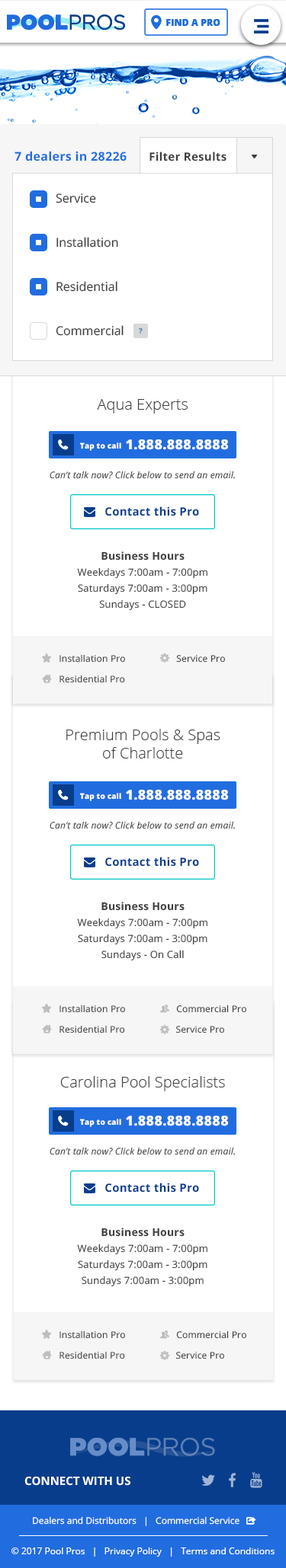
<style>
.page{position:relative;width:286px;height:1568px;background:#ffffff}
.page>*{position:absolute;margin:0}
.t1{font:12.2px "OpenSans-Bold";letter-spacing:0.02em;color:#216ddf}
.t2{font:11.4px "OpenSans-Bold";letter-spacing:0.02em;color:#3f3f3f}
.t3{font:12.2px/44.2px "OpenSans";color:#3f3f3f}
.t4{font:15.2px "OpenSans-Light";color:#3f3f3f}
.t5{font:7.6px "OpenSans-Extrabold";letter-spacing:0.02em;color:#fefefe}
.t6{font:13.7px "OpenSans-Extrabold";letter-spacing:0.02em;color:#fefefe}
.t7{font:9.1px "OpenSans-Italic";letter-spacing:0.02em;color:#3f3f3f}
.t8{font:11.4px "OpenSans-Bold";letter-spacing:0.02em;color:#083d8c}
.t9{font:9.9px/16px "OpenSans";letter-spacing:0.02em;color:#3f3f3f}
.t10{font:10.7px "OpenSans-Bold";letter-spacing:0.02em;color:#3f3f3f}
.t11{font:9.2px/20.6px "OpenSans";letter-spacing:0.02em;color:#3f3f3f}
.t12{font:11.6px "OpenSans-Bold";color:#ffffff}
.t13{font:9px "OpenSans";color:#ffffff}
.t14{font:9.1px "OpenSans";color:#ffffff}
</style>
<div class="page">
<p class="t1" style="left:14px;top:151px;width:112px;height:10px">7 dealers in 28226</p>
<p class="t2" style="left:149px;top:152px;width:77px;height:9px">Filter Results</p>
<p class="t3" style="left:56px;top:193px;width:67px;height:143px">Service<br>Installation<br>Residential<br>Commercial</p>
<p class="t4" style="left:97px;top:399px;width:90px;height:15px">Aqua Experts</p>
<p class="t5" style="left:79px;top:442px;width:42px;height:9px">Tap to call</p>
<p class="t6" style="left:126px;top:439px;width:102px;height:11px">1.888.888.8888</p>
<p class="t7" style="left:49px;top:471px;width:186px;height:8px">Can’t talk now? Click below to send an email.</p>
<p class="t8" style="left:105px;top:506px;width:94px;height:10px">Contact this Pro</p>
<p class="t9" style="left:77px;top:551px;width:130px;height:60px;text-align:center"><span class="t10">Business Hours<br></span>Weekdays 7:00am - 7:00pm<br>Saturdays 7:00am - 3:00pm<br>Sundays - CLOSED</p>
<p class="t11" style="left:59px;top:654px;width:166px;height:29px">Installation Pro                    Service Pro<br>Residential Pro</p>
<p class="t4" style="left:66px;top:729px;width:154px;height:29px;text-align:center">Premium Pools &amp; Spas<br>of Charlotte</p>
<p class="t5" style="left:79px;top:793px;width:42px;height:8px">Tap to call</p>
<p class="t6" style="left:126px;top:790px;width:102px;height:10px">1.888.888.8888</p>
<p class="t7" style="left:49px;top:821px;width:186px;height:8px">Can’t talk now? Click below to send an email.</p>
<p class="t8" style="left:105px;top:857px;width:94px;height:10px">Contact this Pro</p>
<p class="t9" style="left:77px;top:902px;width:130px;height:59px;text-align:center"><span class="t10">Business Hours<br></span>Weekdays 7:00am - 7:00pm<br>Saturdays 7:00am - 3:00pm<br>Sundays - On Call</p>
<p class="t11" style="left:59px;top:1004px;width:187px;height:29px">Installation Pro                    Commercial Pro<br>Residential Pro                    Service Pro</p>
<p class="t4" style="left:60px;top:1076px;width:165px;height:15px">Carolina Pool Specialists</p>
<p class="t5" style="left:79px;top:1119px;width:42px;height:8px">Tap to call</p>
<p class="t6" style="left:126px;top:1116px;width:102px;height:10px">1.888.888.8888</p>
<p class="t7" style="left:49px;top:1147px;width:186px;height:8px">Can’t talk now? Click below to send an email.</p>
<p class="t8" style="left:105px;top:1183px;width:94px;height:10px">Contact this Pro</p>
<p class="t9" style="left:77px;top:1228px;width:130px;height:59px;text-align:center"><span class="t10">Business Hours<br></span>Weekdays 7:00am - 7:00pm<br>Saturdays 7:00am - 3:00pm<br>Sundays 7:00am - 3:00pm</p>
<p class="t11" style="left:59px;top:1330px;width:187px;height:29px">Installation Pro                    Commercial Pro<br>Residential Pro                    Service Pro</p>
<p class="t12" style="left:24px;top:1477px;width:106px;height:9px">CONNECT WITH US</p>
<p class="t13" style="left:33px;top:1516px;width:206px;height:10px">Dealers and Distributors   |   Commercial Service</p>
<p class="t14" style="left:11px;top:1547px;width:263px;height:10px">© 2017 Pool Pros   |   Privacy Policy   |   Terms and Conditions</p>
</div>
